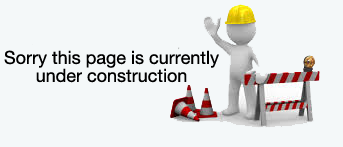
<style>
.page{position:relative;width:343px;height:147px;background:#f4f8f9}
.page>*{position:absolute;margin:0}
.t1{font:18px/18px "HelveticaNeue";color:#000000}
</style>
<div class="page">
<p class="t1" style="left:4px;top:50px;width:215px;height:33px;text-align:center">Sorry this page is currently under construction</p>
</div>
